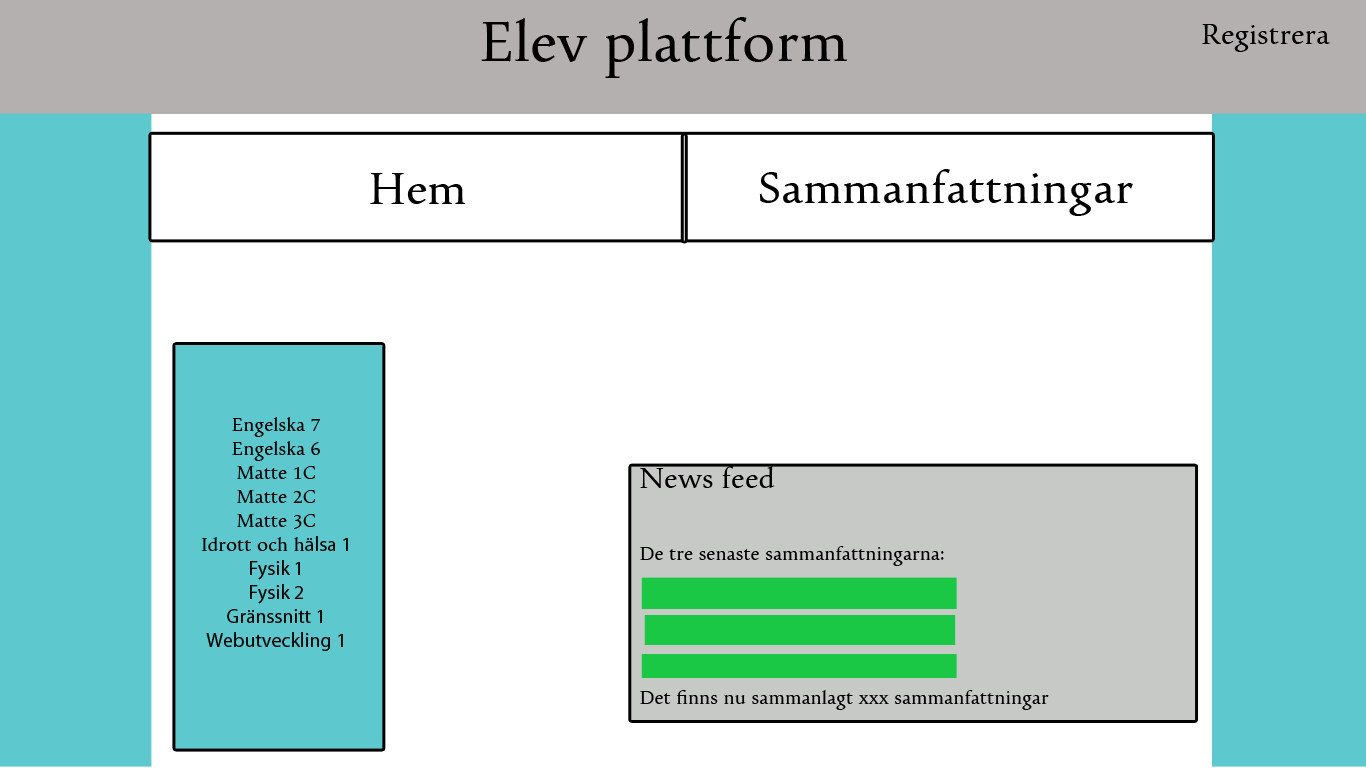
<style>
.page{position:relative;width:1366px;height:768px;background:#ffffff}
.page>*{position:absolute;margin:0}
.t1{font:60px "Pescadero";color:#000000}
.t2{font:30px "Pescadero";color:#000000}
.t3{font:48px "Pescadero";color:#000000}
.t4{font:20px "Pescadero";color:#000000}
.t5{font:20px "MyriadPro-Regular";color:#000000}
</style>
<div class="page">
<p class="t1" style="left:481px;top:17px;width:366px;height:61px">Elev plattform</p>
<p class="t2" style="left:1202px;top:24px;width:128px;height:28px">Registrera</p>
<p class="t3" style="left:370px;top:173px;width:96px;height:31px">Hem</p>
<p class="t3" style="left:759px;top:169px;width:374px;height:47px">Sammanfattningar</p>
<p class="t4" style="left:201px;top:417px;width:147px;height:234px;text-align:center">Engelska 7<br>Engelska 6<br>Matte 1C<br>Matte 2C<br>Matte 3C<br>Idrott och h<span class="t5">älsa 1<br>Fysik 1<br>Fysik 2<br>Gränssnitt 1<br>Webutveckling 1</span></p>
<p class="t4" style="left:640px;top:466px;width:409px;height:244px"><span class="t2"> News feed<br><br> </span>De tre senaste sammanfattningarna:<br><br><br><br> Det finns nu sammanlagt xxx sammanfattningar</p>
</div>
